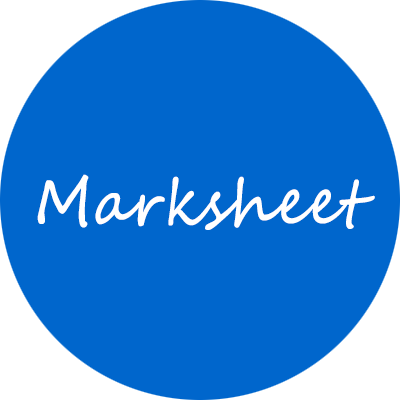
<style>
.page{position:relative;width:400px;height:400px;background:#0066cc}
.page>*{position:absolute;margin:0}
.t1{font:62.6px "SegoeScript";color:#ffffff;font-weight:bold;scale:0.91 1}
</style>
<div class="page">
<p class="t1" style="left:37px;top:174px;width:338px;height:56px">Marksheet</p>
</div>
